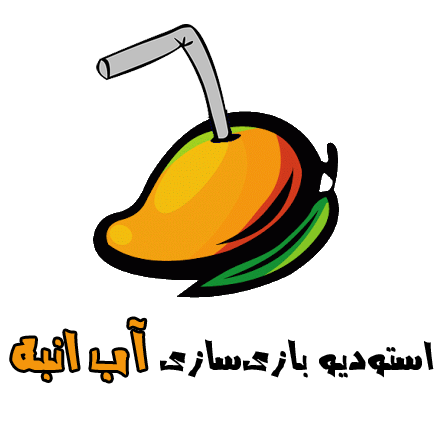
<style>
.page{position:relative;width:438px;height:426px;background:#ffffff}
.page>*{position:absolute;margin:0}
.t1{font:48px "AAref_graffiti";color:#f4960c}
.t2{font:36px "AAref_graffiti";color:#000000}
</style>
<div class="page">
<p class="t1" style="left:12px;top:319px;width:134px;height:62px">آب انبه</p>
<p class="t2" style="left:160px;top:339px;width:274px;height:39px">استودیو بازی‌سازی</p>
</div>
